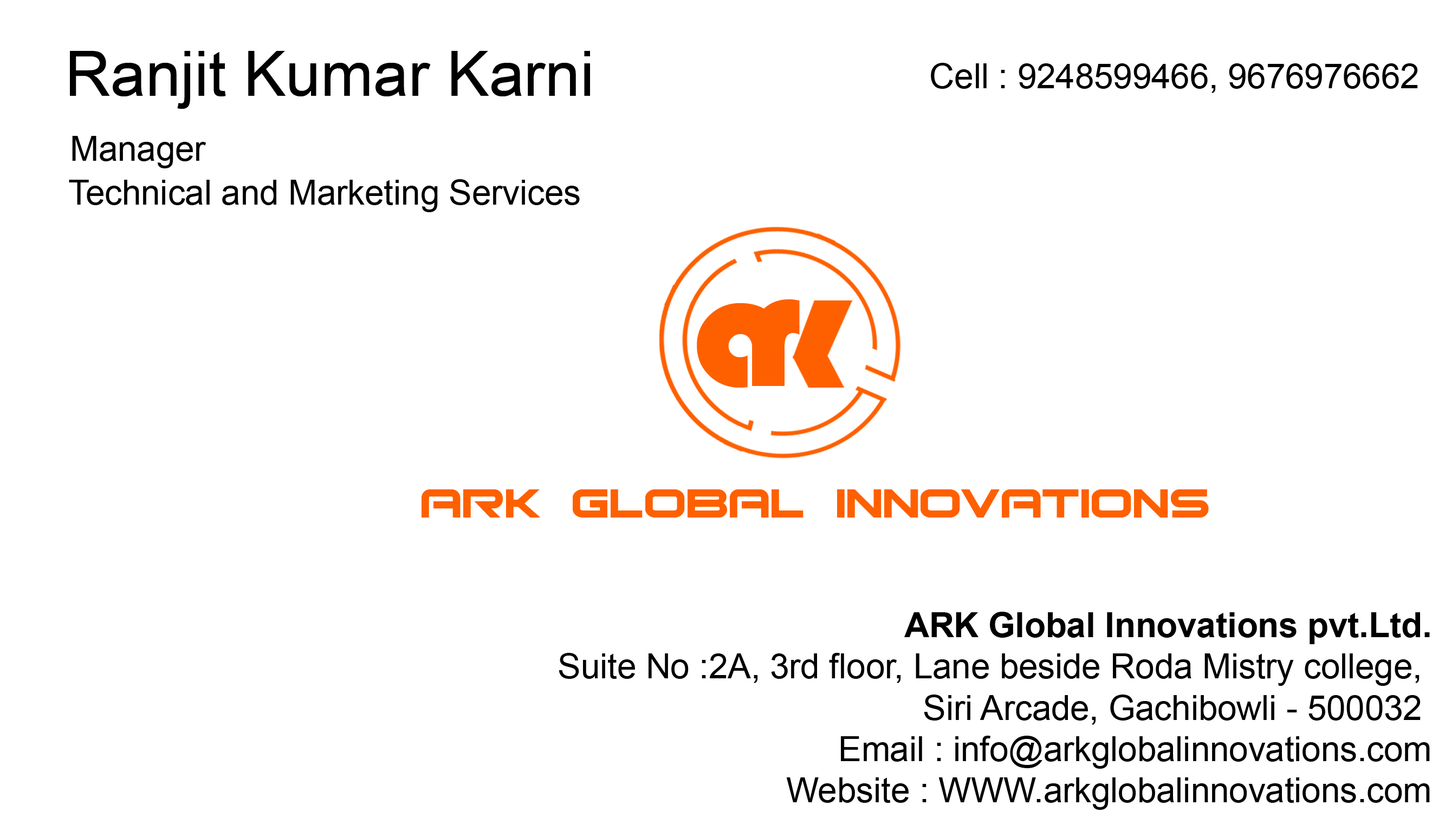
<style>
.page{position:relative;width:1445px;height:825px;background:#ffffff}
.page>*{position:absolute;margin:0}
.t1{font:63.1px "ArialMT";color:#000000}
.t2{font:34.4px "ArialMT";color:#000000}
.t3{font:166.8px "Bauhaus93";color:#fe6000}
.t4{font:173.9px "Bauhaus93";color:#fe6000}
.t5{font:55px "Bitsumishi";color:#fe6000;scale:1.11 1}
.t6{font:34.4px "Arial-BoldMT";color:#000000}
</style>
<div class="page">
<p class="t1" style="left:70px;top:51px;width:520px;height:58px">Ranjit Kumar Karni</p>
<p class="t2" style="left:931px;top:63px;width:486px;height:30px">Cell : 9248599466, 9676976662</p>
<p class="t2" style="left:72px;top:136px;width:134px;height:32px">Manager</p>
<p class="t2" style="left:69px;top:179px;width:511px;height:33px">Technical and Marketing Services</p>
<p class="t3" style="left:697px;top:303px;width:86px;height:85px">a</p>
<p class="t4" style="left:752px;top:299px;width:47px;height:87px">r</p>
<p class="t5" style="left:421px;top:490px;width:787px;height:28px">ARK Global innovations</p>
<p class="t2" style="left:558px;top:612px;width:871px;height:198px;text-align:right"><span class="t6">ARK Global Innovations pvt.Ltd.<br></span>Suite No :2A, 3rd floor, Lane beside Roda Mistry college, <br>Siri Arcade, Gachibowli - 500032 <br>Email : info@arkglobalinnovations.com<br>Website : WWW.arkglobalinnovations.com</p>
</div>
